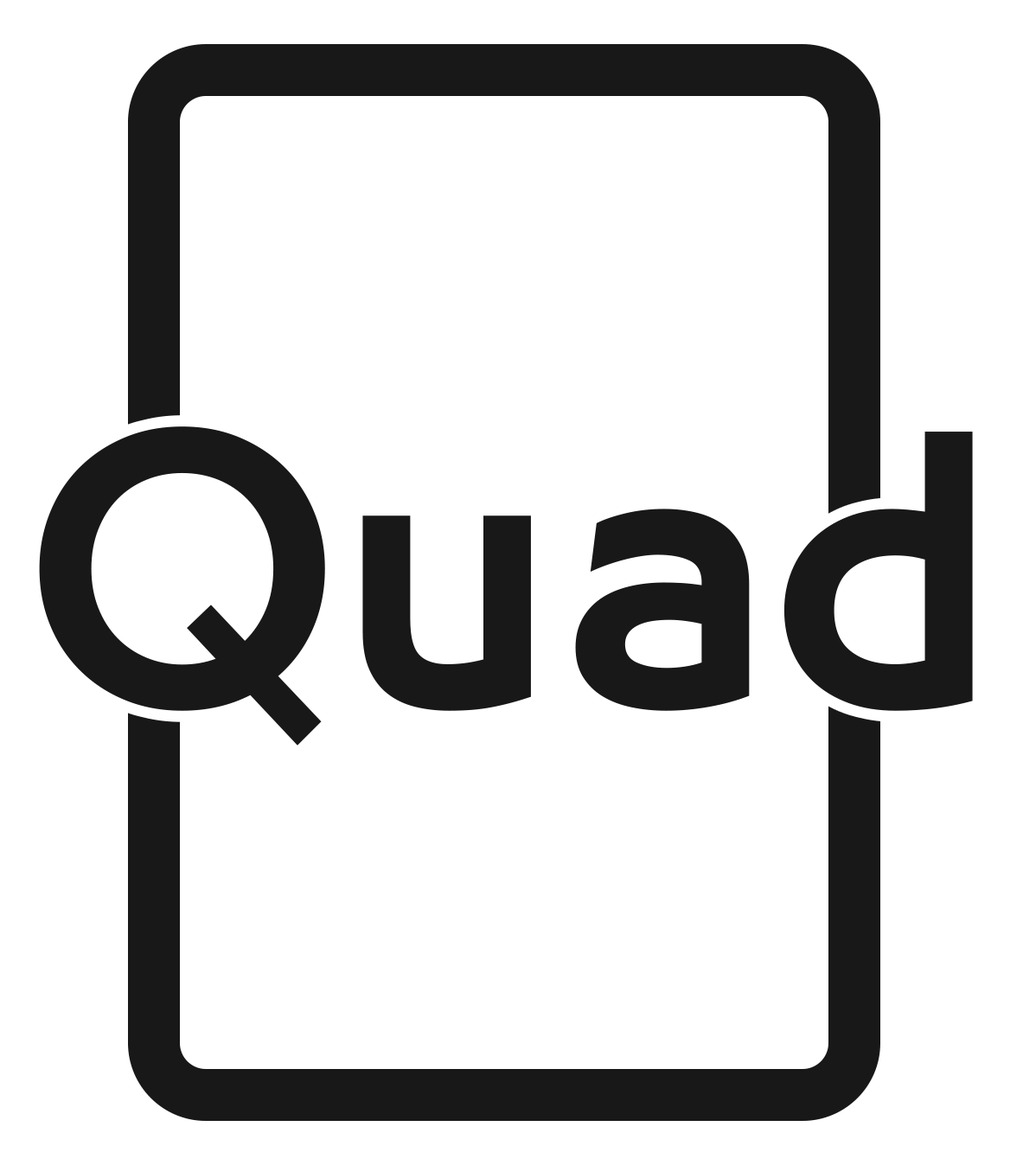
<style>
.page{position:relative;width:1023px;height:1165px;background:#ffffff}
.page>*{position:absolute;margin:0}
.t1{font:339.5px "29LTBukra-Bold";color:#181818}
</style>
<div class="page">
<p class="t1" style="left:39px;top:426px;width:934px;height:320px">Quad</p>
</div>
